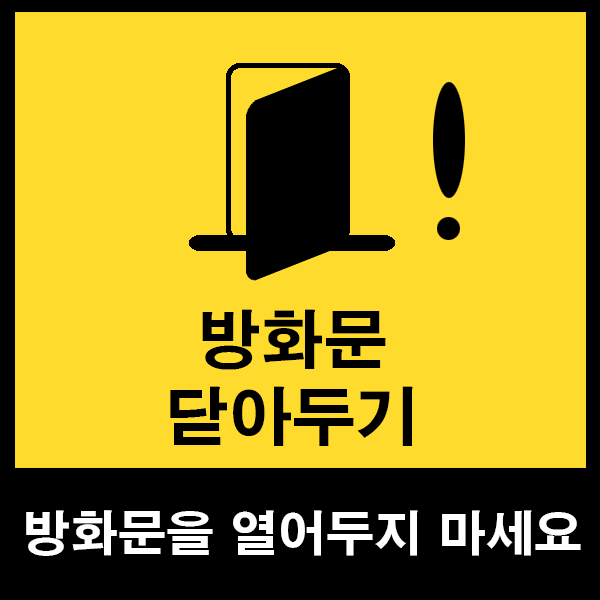
<style>
.page{position:relative;width:600px;height:600px;background:#ffdb2d}
.page>*{position:absolute;margin:0}
.t1{font:63.4px "H2gtrE";color:#000000}
.t2{font:48px "H2gtrE";color:#ffffff}
</style>
<div class="page">
<p class="t1" style="left:170px;top:309px;width:243px;height:137px;text-align:center">방화문<br>닫아두기</p>
<p class="t2" style="left:26px;top:510px;width:555px;height:46px">방화문을 열어두지 마세요</p>
</div>
